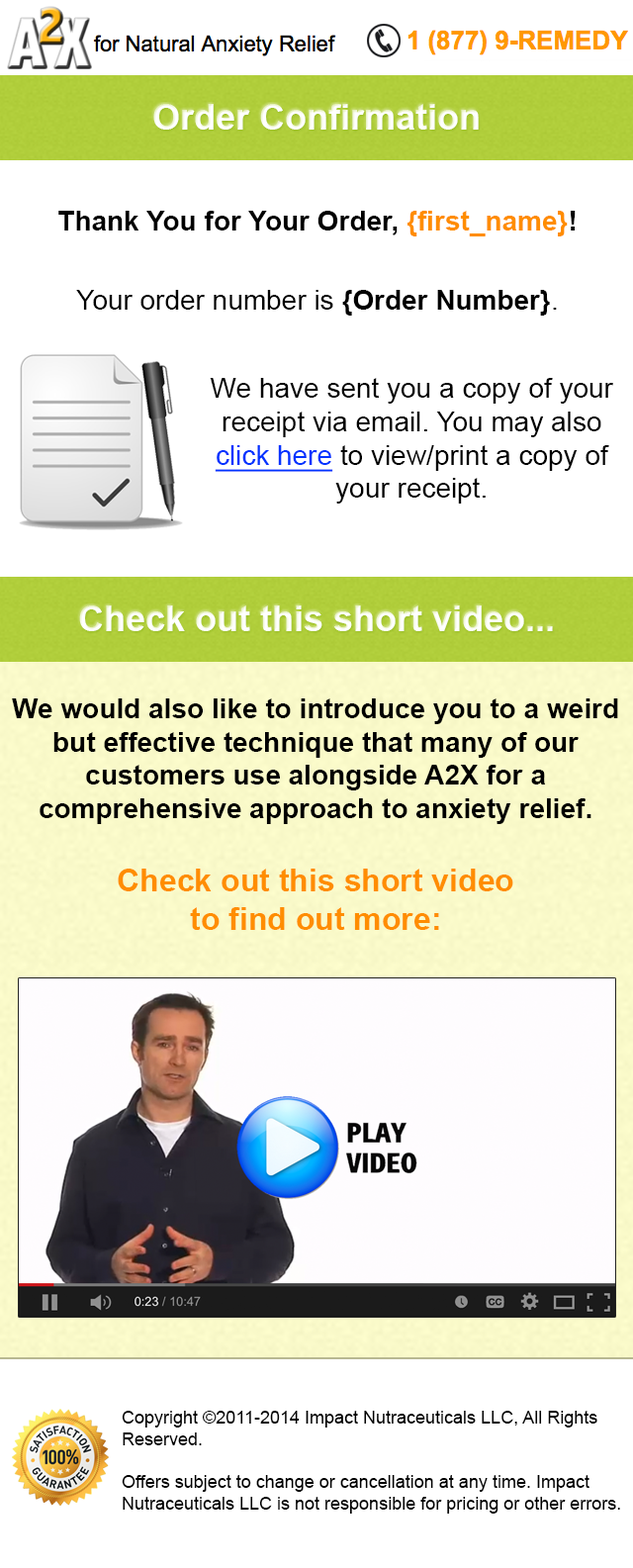
<style>
.page{position:relative;width:633px;height:1568px;background:#ffffff}
.page>*{position:absolute;margin:0}
.t1{font:35.6px "Arial-BoldMT";color:#ffffff}
.t2{font:27.7px "Arial-BoldMT";color:#000000}
.t3{font:27.7px "Arial-BoldMT";color:#ff8d00}
.t4{font:27.7px "ArialMT";color:#000000}
.t5{font:27.7px "ArialMT";color:#0033ff;text-decoration:underline}
.t6{font:31.7px "Arial-BoldMT";color:#ff8d00}
.t7{font:17.8px "ArialMT";color:#000000}
</style>
<div class="page">
<p class="t1" style="left:153px;top:104px;width:326px;height:26px">Order Confirmation</p>
<p class="t2" style="left:58px;top:211px;width:518px;height:25px">Thank You for Your Order, <span class="t3">{first_name}</span>!</p>
<p class="t4" style="left:76px;top:290px;width:481px;height:26px">Your order number is <span class="t2">{Order Number}</span>.</p>
<p class="t4" style="left:210px;top:378px;width:403px;height:126px;text-align:center">We have sent you a copy of your receipt via email. You may also <span class="t5">click here</span> to view/print a copy of your receipt.</p>
<p class="t1" style="left:79px;top:605px;width:474px;height:26px">Check out this short video...</p>
<p class="t2" style="left:12px;top:698px;width:606px;height:232px;text-align:center">We would also like to introduce you to a weird but effective technique that many of our customers use alongside A2X for a comprehensive approach to anxiety relief.<br><br><span class="t6">Check out this short video<br>to find out more:</span></p>
<p class="t7" style="left:122px;top:1411px;width:498px;height:103px">Copyright ©2011-2014 Impact Nutraceuticals LLC, All Rights Reserved.<br><br>Offers subject to change or cancellation at any time. Impact Nutraceuticals LLC is not responsible for pricing or other errors.</p>
</div>
